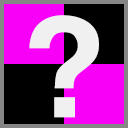
<style>
.page{position:relative;width:128px;height:128px;background:#f800f8}
.page>*{position:absolute;margin:0}
.t1{font:140px "Helvetica-Bold";color:#f0f0f0}
</style>
<div class="page">
<p class="t1" style="left:29px;top:15px;width:70px;height:103px">?</p>
</div>
